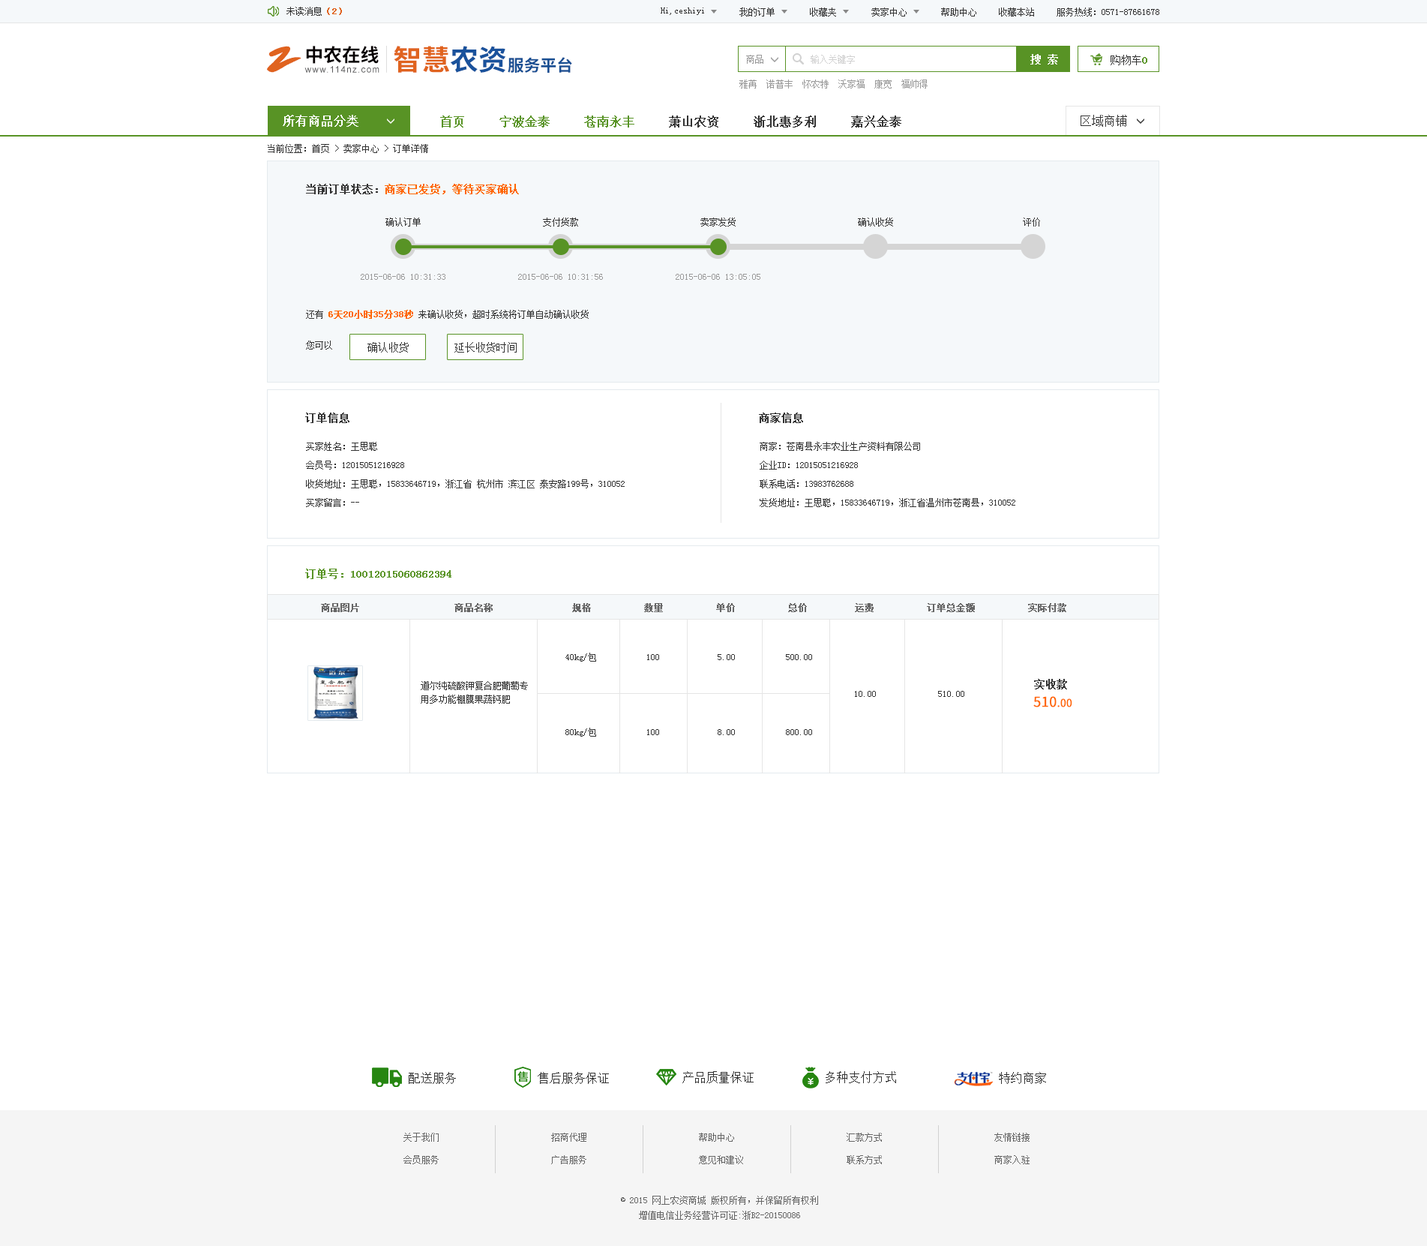
<style>
.page{position:relative;width:1427px;height:1246px;background:#ffffff}
.page>*{position:absolute;margin:0}
.t1{font:9px "SimSun";color:#333333}
.t2{font:9px "SimSun";color:#e0631f;font-weight:bold}
.t3{font:38px "SmudgerLetPlain";color:#e0631f}
.t4{font:18.6px "SourceHanSansCN-Bold";color:#060001}
.t5{font:28.4px "SourceHanSansCN-Bold";color:#e0631f}
.t6{font:28.4px "SourceHanSansCN-Bold";color:#1a529c}
.t7{font:10.5px "SimSun";color:#ffffff;font-weight:bold}
.t8{font:16.3px "SourceHanSansCN-Bold";color:#194f93}
.t9{font:9px "SimSun";color:#999999}
.t10{font:9px "SimSun";color:#d1d1d1}
.t11{font:10.5px "SimSun";color:#333333}
.t12{font:10.5px "SimSun";color:#589325;font-weight:bold}
.t13{font:8.9px "ArialMT";letter-spacing:0.1em;color:#585859}
.t14{font:12px "SimSun";color:#ffffff;font-weight:bold}
.t15{font:12px "SimSun";color:#333333;font-weight:bold}
.t16{font:12px "SimSun";color:#589325;font-weight:bold}
.t17{font:12px "SimSun";color:#333333}
.t18{font:10.5px "SimSun";color:#ff6600;font-weight:bold}
.t19{font:10.5px "SimSun";color:#333333;font-weight:bold}
.t20{font:9px "SimSun";color:#ff6600;font-weight:bold}
.t21{font:9px/18.8px "SimSun";color:#333333}
.t22{font:9px "SimSun";color:#666666;font-weight:bold}
.t23{font:9px/13.5px "SimSun";color:#333333}
.t24{font:13.5px "SourceHanSansCN-Regular";color:#ff6600;font-weight:bold}
.t25{font:10.5px "SourceHanSansCN-Regular";color:#ff6600;font-weight:bold}
.t26{font:9px/22.5px "SimSun";color:#666666}
.t27{font:9px/15px "SimSun";color:#666666}
</style>
<div class="page">
<p class="t1" style="left:286px;top:7px;width:56px;height:9px">未读消息<span class="t2">（2）</span></p>
<p class="t1" style="left:661px;top:8px;width:43px;height:7px">Hi,ceshiyi</p>
<p class="t1" style="left:740px;top:8px;width:35px;height:8px">我的订单</p>
<p class="t1" style="left:810px;top:8px;width:26px;height:8px">收藏夹</p>
<p class="t1" style="left:872px;top:8px;width:35px;height:8px">卖家中心</p>
<p class="t1" style="left:941px;top:8px;width:35px;height:8px">帮助中心</p>
<p class="t1" style="left:999px;top:8px;width:35px;height:8px">收藏本站</p>
<p class="t1" style="left:1057px;top:8px;width:103px;height:8px">服务热线：0571-87661678</p>
<p class="t3" style="left:267px;top:46px;width:35px;height:27px">Z</p>
<p class="t4" style="left:306px;top:46px;width:73px;height:18px">中农在线</p>
<p class="t5" style="left:394px;top:46px;width:112px;height:27px">智慧<span class="t6">农资</span></p>
<p class="t7" style="left:1030px;top:54px;width:28px;height:10px">搜 索</p>
<p class="t8" style="left:508px;top:57px;width:64px;height:16px">服务平台</p>
<p class="t9" style="left:746px;top:55px;width:18px;height:9px">商品</p>
<p class="t10" style="left:811px;top:55px;width:44px;height:9px">输入关键字</p>
<p class="t11" style="left:1111px;top:55px;width:37px;height:10px">购物车<span class="t12">0</span></p>
<p class="t13" style="left:304px;top:66px;width:76px;height:7px">www.114nz.com</p>
<p class="t9" style="left:740px;top:80px;width:188px;height:8px">雅苒  诺普丰  怀农特  沃家福  康宽  福帅得</p>
<p class="t14" style="left:283px;top:115px;width:75px;height:12px">所有商品分类</p>
<p class="t15" style="left:440px;top:116px;width:462px;height:12px"><span class="t16">首页     宁波金泰     苍南永丰    </span> 萧山农资     浙北惠多利     嘉兴金泰</p>
<p class="t17" style="left:1081px;top:115px;width:46px;height:12px">区域商铺</p>
<p class="t1" style="left:268px;top:144px;width:160px;height:9px">当前位置：首页 &gt; 卖家中心 &gt; 订单详情</p>
<p class="t18" style="left:306px;top:184px;width:213px;height:10px"><span class="t19">当前订单状态：</span>商家已发货，等待买家确认</p>
<p class="t1" style="left:386px;top:218px;width:35px;height:8px">确认订单</p>
<p class="t1" style="left:543px;top:218px;width:35px;height:8px">支付货款</p>
<p class="t1" style="left:700px;top:218px;width:36px;height:8px">卖家发货</p>
<p class="t1" style="left:858px;top:218px;width:35px;height:8px">确认收货</p>
<p class="t1" style="left:1023px;top:218px;width:17px;height:8px">评价</p>
<p class="t9" style="left:361px;top:274px;width:85px;height:6px">2015-06-06 10:31:33</p>
<p class="t9" style="left:518px;top:274px;width:85px;height:6px">2015-06-06 10:31:56</p>
<p class="t9" style="left:676px;top:274px;width:84px;height:6px">2015-06-06 13:05:05</p>
<p class="t1" style="left:306px;top:310px;width:283px;height:9px">还有 <span class="t20">6天20小时35分38秒</span> 来确认收货，超时系统将订单自动确认收货</p>
<p class="t1" style="left:306px;top:340px;width:26px;height:10px">您可以</p>
<p class="t11" style="left:368px;top:342px;width:41px;height:10px">确认收货</p>
<p class="t11" style="left:454px;top:342px;width:63px;height:10px">延长收货时间</p>
<p class="t19" style="left:305px;top:412px;width:45px;height:11px">订单信息</p>
<p class="t19" style="left:759px;top:412px;width:44px;height:11px">商家信息</p>
<p class="t21" style="left:306px;top:442px;width:319px;height:65px">买家姓名：王思聪<br>会员号：12015051216928<br>收货地址：王思聪，15833646719，浙江省 杭州市 滨江区 泰安路199号，310052<br>买家留言：--</p>
<p class="t21" style="left:760px;top:442px;width:256px;height:65px">商家：苍南县永丰农业生产资料有限公司<br>企业ID：12015051216928<br>联系电话：13983762688<br>发货地址：王思聪，15833646719，浙江省温州市苍南县，310052</p>
<p class="t12" style="left:305px;top:568px;width:147px;height:11px">订单号：10012015060862394</p>
<p class="t22" style="left:321px;top:603px;width:745px;height:9px">商品图片                  商品名称               规格          数量          单价          总价         运费          订单总金额          实际付款</p>
<p class="t1" style="left:566px;top:652px;width:30px;height:10px">40kg/包</p>
<p class="t1" style="left:647px;top:654px;width:12px;height:6px">100</p>
<p class="t1" style="left:718px;top:654px;width:17px;height:6px">5.00</p>
<p class="t1" style="left:786px;top:654px;width:26px;height:6px">500.00</p>
<p class="t23" style="left:421px;top:681px;width:107px;height:23px">道尔纯硫酸钾复合肥葡萄专<br>用多功能棚膜果蔬钙肥</p>
<p class="t19" style="left:1034px;top:679px;width:33px;height:10px">实收款</p>
<p class="t1" style="left:855px;top:691px;width:21px;height:6px">10.00</p>
<p class="t1" style="left:938px;top:691px;width:26px;height:6px">510.00</p>
<p class="t24" style="left:1034px;top:696px;width:38px;height:11px">510<span class="t25">.00</span></p>
<p class="t1" style="left:566px;top:728px;width:30px;height:8px">80kg/包</p>
<p class="t1" style="left:647px;top:729px;width:12px;height:6px">100</p>
<p class="t1" style="left:718px;top:729px;width:17px;height:6px">8.00</p>
<p class="t1" style="left:786px;top:729px;width:26px;height:6px">800.00</p>
<p class="t17" style="left:409px;top:1072px;width:47px;height:12px">配送服务</p>
<p class="t17" style="left:538px;top:1072px;width:71px;height:12px">售后服务保证</p>
<p class="t17" style="left:682px;top:1071px;width:72px;height:12px">产品质量保证</p>
<p class="t17" style="left:826px;top:1071px;width:70px;height:12px">多种支付方式</p>
<p class="t17" style="left:999px;top:1072px;width:47px;height:12px">特约商家</p>
<p class="t26" style="left:404px;top:1132px;width:35px;height:32px">关于我们<br>会员服务</p>
<p class="t26" style="left:551px;top:1132px;width:35px;height:32px">招商代理<br>广告服务</p>
<p class="t26" style="left:699px;top:1132px;width:44px;height:32px">帮助中心<br>意见和建议</p>
<p class="t26" style="left:847px;top:1132px;width:35px;height:32px">汇款方式<br>联系方式</p>
<p class="t26" style="left:994px;top:1132px;width:36px;height:32px">友情链接<br>商家入驻</p>
<p class="t27" style="left:621px;top:1196px;width:197px;height:24px;text-align:center">© 2015 网上农资商城 版权所有，并保留所有权利<br>增值电信业务经营许可证:浙B2-20150086</p>
</div>
